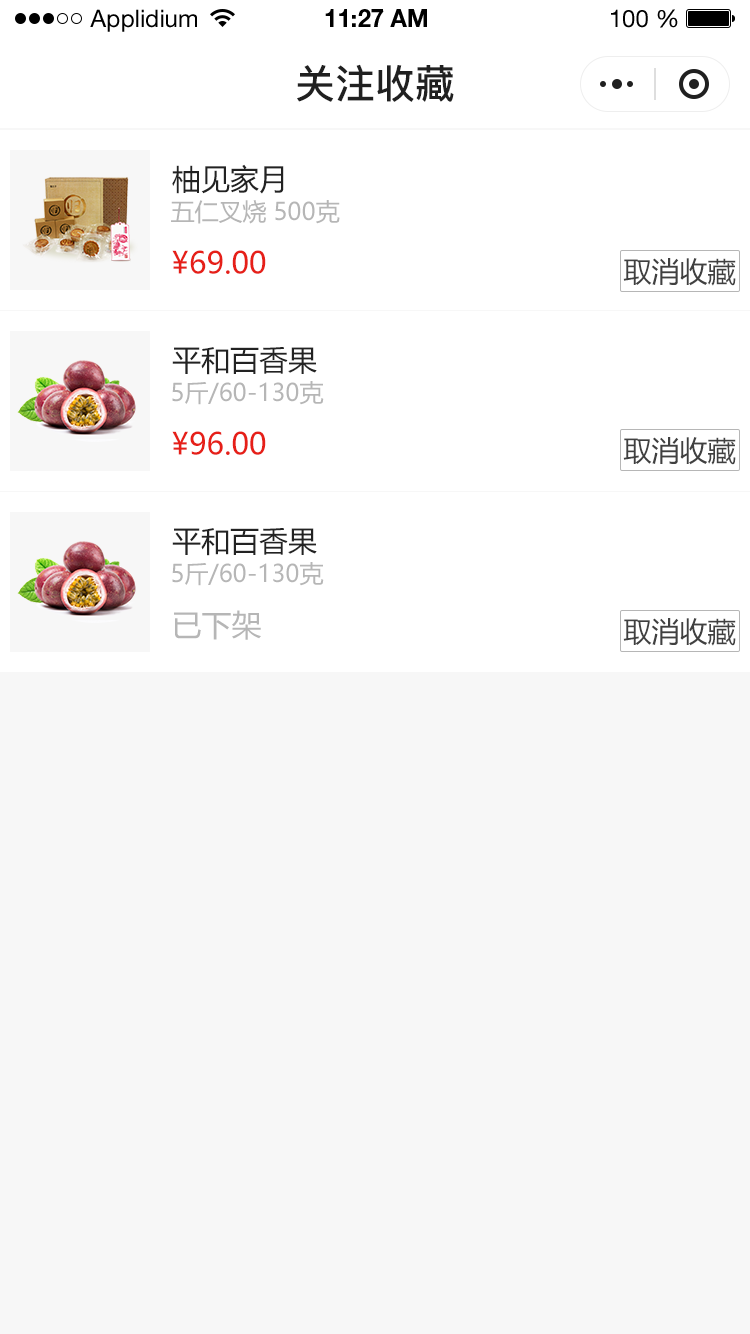
<style>
.page{position:relative;width:750px;height:1334px;background:#f7f7f7}
.page>*{position:absolute;margin:0}
.t1{font:24px "HelveticaNeueLTStd-Roman";color:#000000}
.t2{font:24px "HelveticaNeueLTStd-Bd";color:#000000}
.t3{font:40px "PingFang-SC-Bold";color:#202020;text-transform:uppercase}
.t4{font:29px "MicrosoftYaHei";color:#222222;text-transform:uppercase}
.t5{font:24px "MicrosoftYaHei";color:#b6b6b6;text-transform:uppercase}
.t6{font:30px "MicrosoftYaHei";color:#e61f18;text-transform:uppercase}
.t7{font:28px "MicrosoftYaHei";color:#404040;text-transform:uppercase}
.t8{font:30px "MicrosoftYaHei";color:#b6b6b6;text-transform:uppercase}
</style>
<div class="page">
<p class="t1" style="left:90px;top:9px;width:107px;height:23px">Applidium</p>
<p class="t2" style="left:325px;top:9px;width:102px;height:18px">11:27 AM</p>
<p class="t1" style="left:611px;top:9px;width:67px;height:19px">100 %</p>
<p class="t3" style="left:297px;top:64px;width:157px;height:38px">关注收藏</p>
<p class="t4" style="left:172px;top:164px;width:112px;height:30px">柚见家月</p>
<p class="t5" style="left:171px;top:200px;width:169px;height:24px">五仁叉烧 500克</p>
<p class="t6" style="left:172px;top:250px;width:94px;height:24px">¥69.00</p>
<p class="t7" style="left:623px;top:258px;width:113px;height:28px">取消收藏</p>
<p class="t4" style="left:172px;top:347px;width:145px;height:28px">平和百香果</p>
<p class="t5" style="left:172px;top:381px;width:152px;height:24px">5斤/60-130克</p>
<p class="t6" style="left:172px;top:431px;width:94px;height:24px">¥96.00</p>
<p class="t7" style="left:623px;top:437px;width:113px;height:28px">取消收藏</p>
<p class="t4" style="left:172px;top:528px;width:145px;height:28px">平和百香果</p>
<p class="t5" style="left:172px;top:562px;width:152px;height:24px">5斤/60-130克</p>
<p class="t8" style="left:174px;top:610px;width:87px;height:30px">已下架</p>
<p class="t7" style="left:623px;top:618px;width:113px;height:28px">取消收藏</p>
</div>
